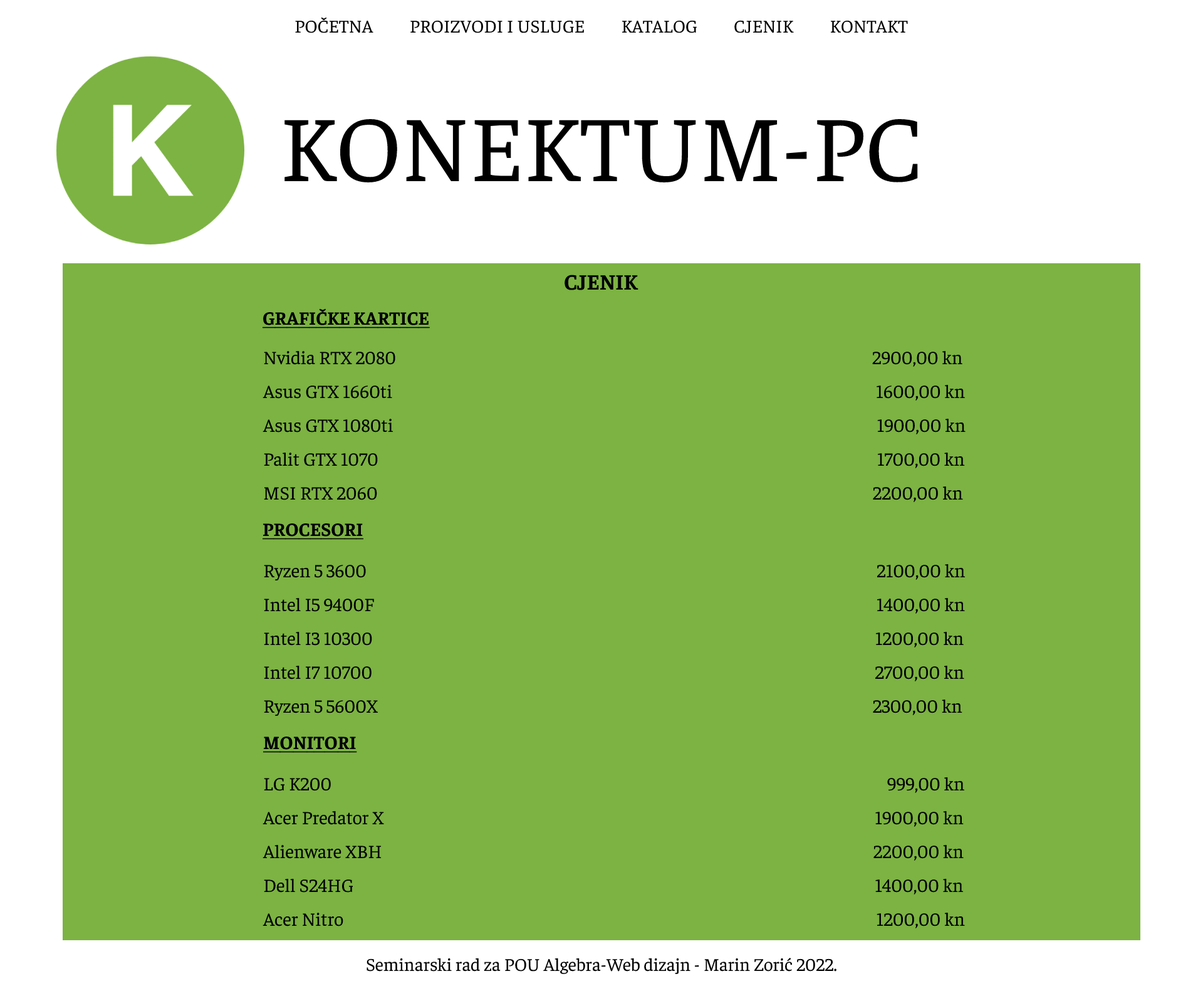
<style>
.page{position:relative;width:1203px;height:991px;background:#7cb342}
.page>*{position:absolute;margin:0}
.t1{font:18.2px "Faustina-Regular";color:#000000}
.t2{font:94px "Faustina-Regular";color:#000000}
.t3{font:21.9px "Faustina-Bold";color:#000000}
.t4{font:18.8px "Faustina-Bold";color:#000000;text-decoration:underline}
.t5{font:18.8px "Faustina-Regular";color:#000000}
</style>
<div class="page">
<p class="t1" style="left:295px;top:17px;width:613px;height:16px">POČETNA          PROIZVODI I USLUGE          KATALOG          CJENIK          KONTAKT</p>
<p class="t2" style="left:285px;top:119px;width:633px;height:63px">KONEKTUM-PC</p>
<p class="t3" style="left:565px;top:275px;width:74px;height:15px">CJENIK</p>
<p class="t4" style="left:263px;top:308px;width:167px;height:20px">GRAFIČKE KARTICE</p>
<p class="t5" style="left:263px;top:351px;width:703px;height:151px">Nvidia RTX 2080                                                                                                                              2900,00 kn<br>Asus GTX 1660ti                                                                                                                                1600,00 kn<br>Asus GTX 1080ti                                                                                                                                1900,00 kn<br>Palit GTX 1070                                                                                                                                    1700,00 kn<br>MSI RTX 2060                                                                                                                                   2200,00 kn</p>
<p class="t4" style="left:263px;top:523px;width:101px;height:17px">PROCESORI</p>
<p class="t5" style="left:264px;top:564px;width:702px;height:152px">Ryzen 5 3600                                                                                                                                       2100,00 kn<br>Intel I5 9400F                                                                                                                                     1400,00 kn<br>Intel I3 10300                                                                                                                                     1200,00 kn<br>Intel I7 10700                                                                                                                                     2700,00 kn<br>Ryzen 5 5600X                                                                                                                                   2300,00 kn</p>
<p class="t4" style="left:263px;top:736px;width:94px;height:17px">MONITORI</p>
<p class="t5" style="left:263px;top:777px;width:702px;height:151px">LG K200                                                                                                                                                   999,00 kn<br>Acer Predator X                                                                                                                                  1900,00 kn<br>Alienware XBH                                                                                                                                  2200,00 kn<br>Dell S24HG                                                                                                                                          1400,00 kn<br>Acer Nitro                                                                                                                                             1200,00 kn</p>
<p class="t1" style="left:367px;top:958px;width:470px;height:16px">Seminarski rad za POU Algebra-Web dizajn - Marin Zorić 2022.</p>
</div>
